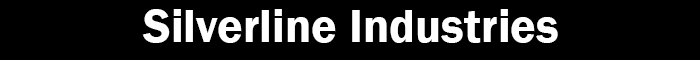
<style>
.page{position:relative;width:700px;height:60px;background:#000000}
.page>*{position:absolute;margin:0}
.t1{font:48px "FranklinGothic-Demi";color:#ffffff}
</style>
<div class="page">
<p class="t1" style="left:142px;top:9px;width:416px;height:34px">Silverline Industries</p>
</div>
